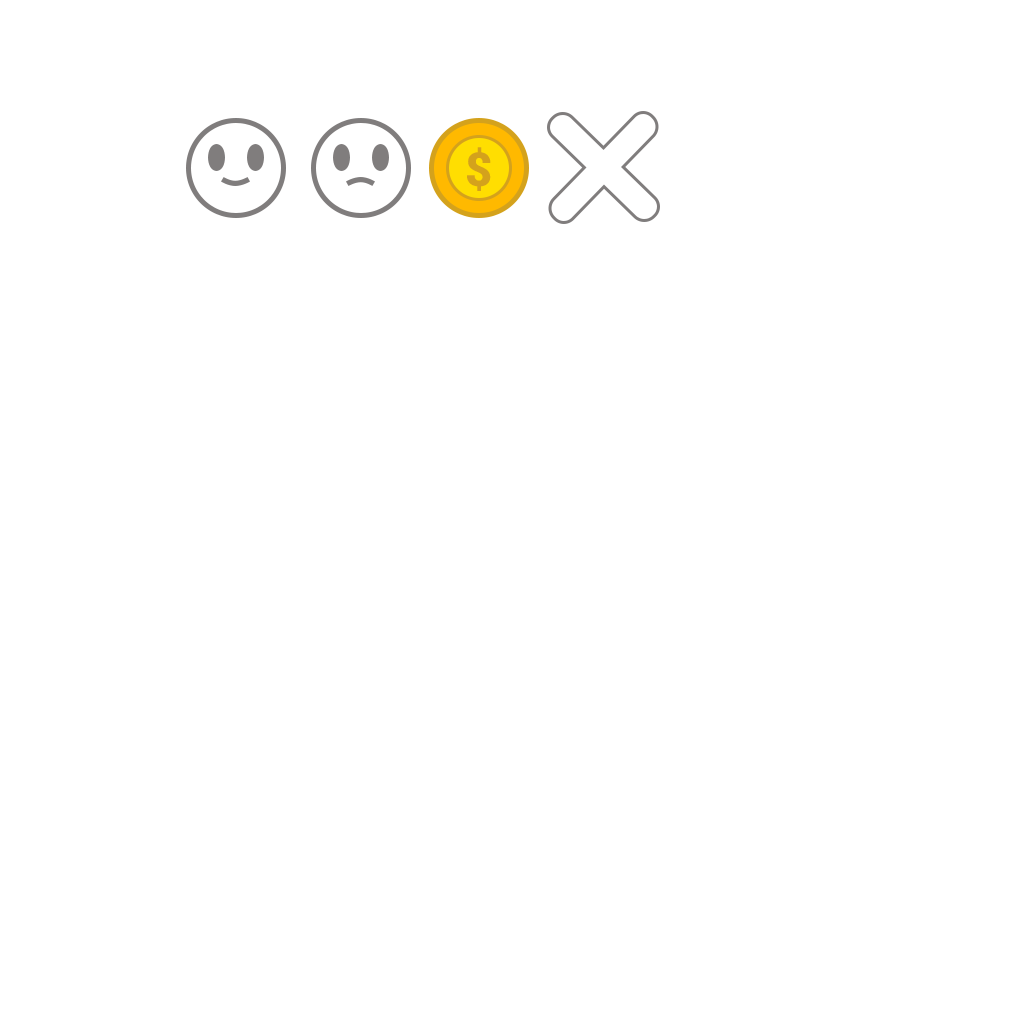
<style>
.page{position:relative;width:1024px;height:1024px;background:#ffffff}
.page>*{position:absolute;margin:0}
.t1{font:47.1px "Roboto-Black";color:#d4a21c}
</style>
<div class="page">
<p class="t1" style="left:467px;top:147px;width:24px;height:44px">$</p>
</div>
